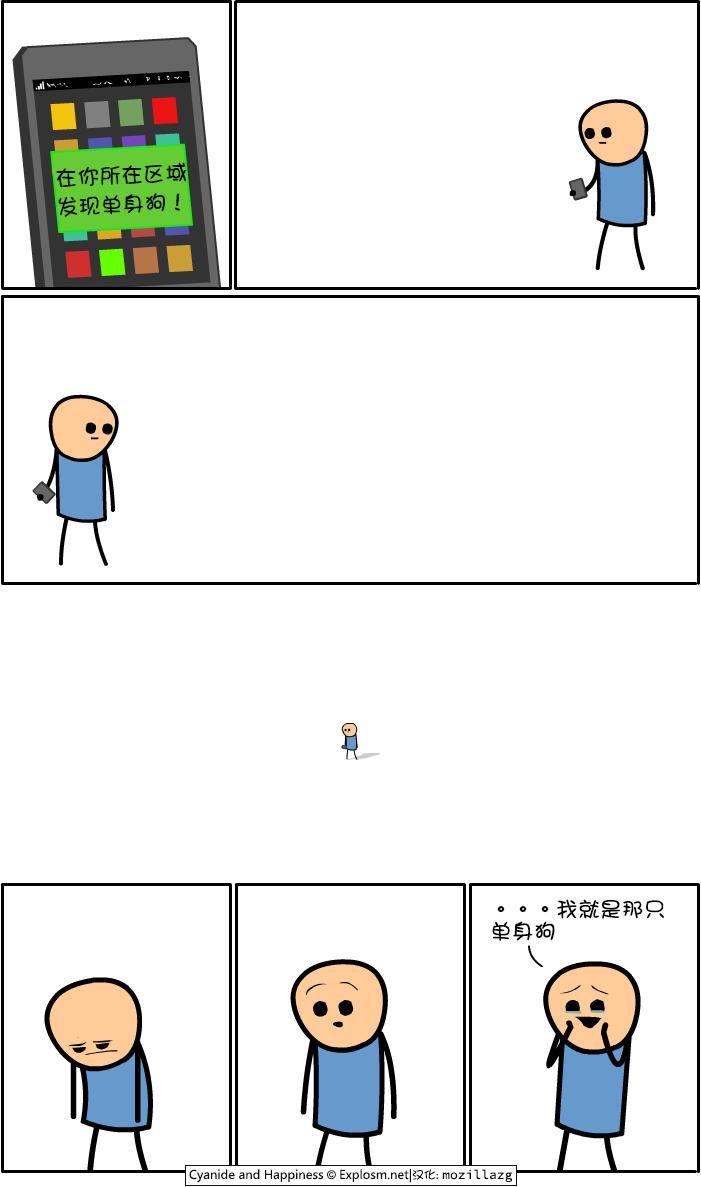
<style>
.page{position:relative;width:701px;height:1187px;background:#ffffff}
.page>*{position:absolute;margin:0}
.t1{font:22px/29px "DFGirl";color:#000000}
.t2{font:22px/22px "DFGirl";color:#000000}
</style>
<div class="page">
<p class="t1" style="left:56px;top:162px;width:131px;height:55px;rotate:-3deg">在你所在区域<br>发现单身狗！</p>
<p class="t2" style="left:492px;top:899px;width:173px;height:42px">。。。我就是那只<br>单身狗</p>
</div>
